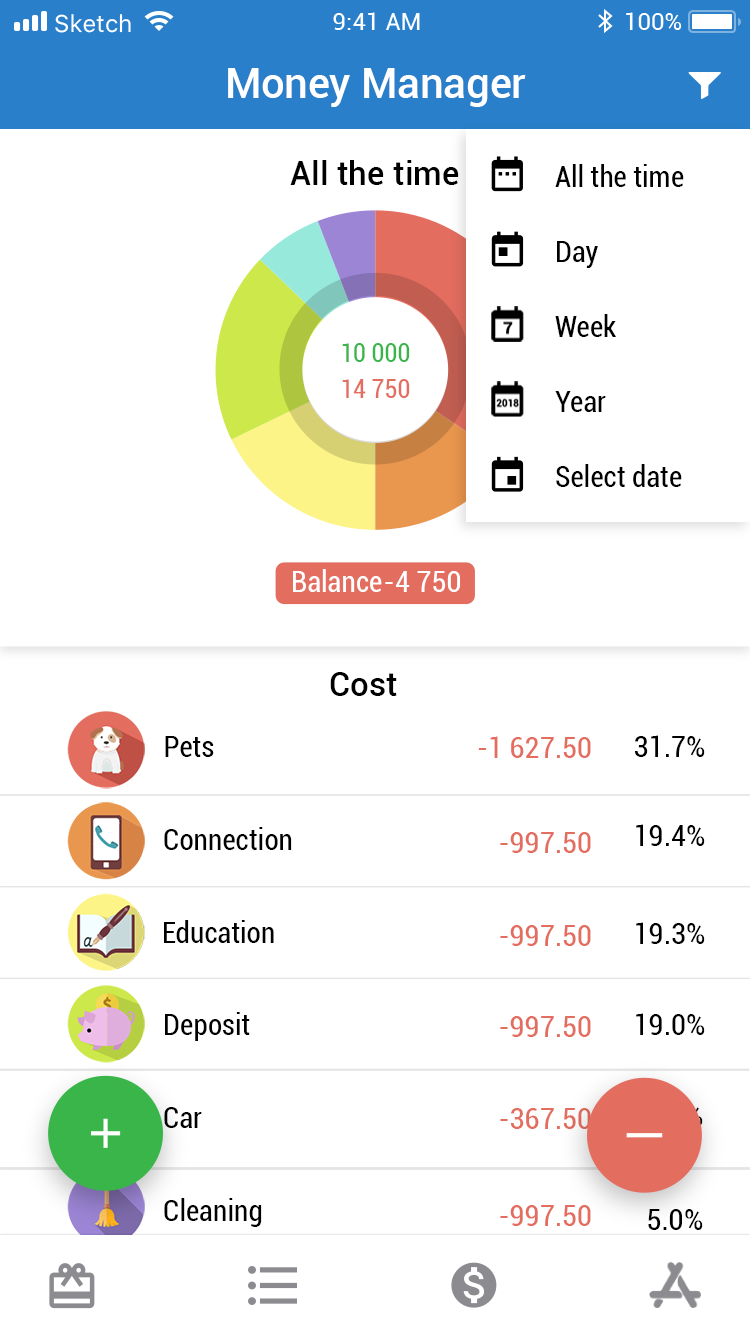
<style>
.page{position:relative;width:750px;height:1336px;background:#ffffff}
.page>*{position:absolute;margin:0}
.t1{font:41.6px "Roboto-Medium";color:#ffffff}
.t2{font:33.4px "Roboto-Medium";color:#000000}
.t3{font:29.2px "Roboto-Condensed";color:#000000}
.t4{font:25px "Roboto-Condensed";color:#39b54a}
.t5{font:25px "Roboto-Condensed";color:#e36d5f}
.t6{font:29.2px "Roboto-Condensed";color:#ffffff}
.t7{font:33.3px "Roboto-Medium";color:#000000}
.t8{font:29.2px "Roboto-Condensed";color:#e36d5f}
</style>
<div class="page">
<p class="t1" style="left:228px;top:68px;width:298px;height:39px">Money Manager</p>
<p class="t2" style="left:290px;top:160px;width:169px;height:25px">All the time</p>
<p class="t3" style="left:555px;top:164px;width:129px;height:23px">All the time</p>
<p class="t3" style="left:557px;top:241px;width:41px;height:27px">Day</p>
<p class="t3" style="left:555px;top:314px;width:61px;height:23px">Week</p>
<p class="t4" style="left:342px;top:343px;width:68px;height:19px">10 000</p>
<p class="t5" style="left:342px;top:379px;width:68px;height:19px">14 750</p>
<p class="t3" style="left:555px;top:391px;width:51px;height:21px">Year</p>
<p class="t3" style="left:556px;top:464px;width:126px;height:23px">Select date</p>
<p class="t6" style="left:293px;top:569px;width:89px;height:23px">Balance</p>
<p class="t6" style="left:385px;top:571px;width:75px;height:21px">-4 750</p>
<p class="t7" style="left:330px;top:672px;width:67px;height:24px">Сost</p>
<p class="t3" style="left:165px;top:736px;width:49px;height:21px">Pets</p>
<p class="t8" style="left:478px;top:736px;width:113px;height:22px">-1 627.50</p>
<p class="t3" style="left:634px;top:735px;width:71px;height:22px">31.7%</p>
<p class="t3" style="left:164px;top:827px;width:128px;height:23px">Connection</p>
<p class="t8" style="left:500px;top:832px;width:91px;height:21px">-997.50</p>
<p class="t3" style="left:636px;top:824px;width:69px;height:22px">19.4%</p>
<p class="t3" style="left:164px;top:920px;width:110px;height:23px">Education</p>
<p class="t8" style="left:500px;top:925px;width:91px;height:21px">-997.50</p>
<p class="t3" style="left:636px;top:922px;width:69px;height:22px">19.3%</p>
<p class="t3" style="left:165px;top:1012px;width:85px;height:29px">Deposit</p>
<p class="t3" style="left:636px;top:1013px;width:69px;height:22px">19.0%</p>
<p class="t8" style="left:500px;top:1016px;width:91px;height:21px">-997.50</p>
<p class="t3" style="left:164px;top:1107px;width:38px;height:21px">Car</p>
<p class="t8" style="left:500px;top:1108px;width:91px;height:21px">-367.50</p>
<p class="t3" style="left:164px;top:1198px;width:98px;height:29px">Cleaning</p>
<p class="t8" style="left:500px;top:1205px;width:91px;height:21px">-997.50</p>
<p class="t3" style="left:648px;top:1209px;width:55px;height:21px">5.0%</p>
</div>
